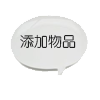
<style>
.page{position:relative;width:100px;height:100px;background:#ffffff}
.page>*{position:absolute;margin:0}
.t1{font:14px "YouYuan"}
</style>
<div class="page">
<p class="t1" style="left:20px;top:34px;width:56px;height:15px">添加物品</p>
</div>
